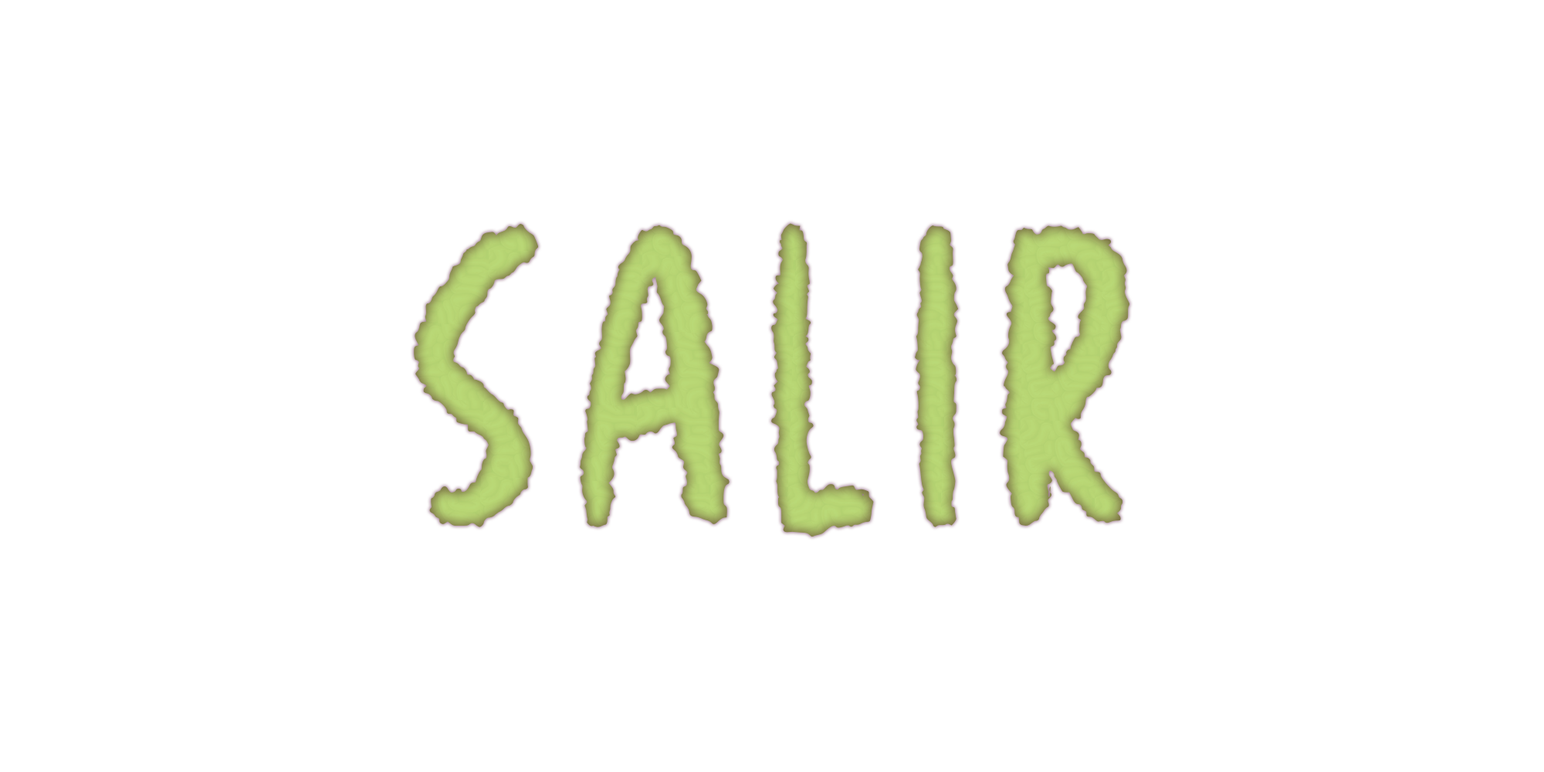
<style>
.page{position:relative;width:1544px;height:772px;background:#ffffff}
.page>*{position:absolute;margin:0}
.t1{font:321.7px "Metalien";letter-spacing:0.1em;color:#b7d974}
</style>
<div class="page">
<p class="t1" style="left:414px;top:223px;width:716px;height:314px">Salir</p>
</div>
